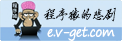
<style>
.page{position:relative;width:122px;height:41px}
.page>*{position:absolute;margin:0}
.t1{font:14px "FZYBXSJW--GB1-0";letter-spacing:-0.05em;color:#000000;font-style:italic;scale:0.9 1}
.t2{font:14px "SegoePrint";letter-spacing:-0.05em;color:#ffffff;scale:0.9 1}
</style>
<div class="page">
<p class="t1" style="left:43px;top:7px;width:73px;height:15px">程序猿的悲剧</p>
<p class="t2" style="left:47px;top:26px;width:68px;height:16px">e.v-get.com</p>
</div>
